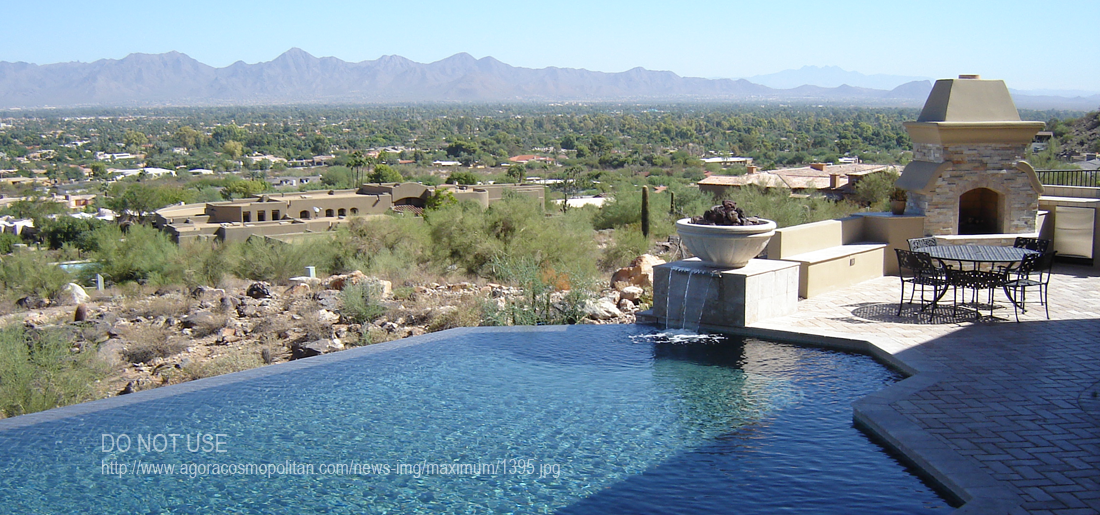
<style>
.page{position:relative;width:1100px;height:515px}
.page>*{position:absolute;margin:0}
.t1{font:25px "ArialNarrow";color:#a5bece}
.t2{font:19.4px "ArialNarrow";color:#b6cad7}
</style>
<div class="page">
<p class="t1" style="left:102px;top:434px;width:126px;height:18px">DO NOT USE</p>
<p class="t2" style="left:101px;top:459px;width:459px;height:19px">http://www.agoracosmopolitan.com/news-img/maximum/1395.jpg</p>
</div>
